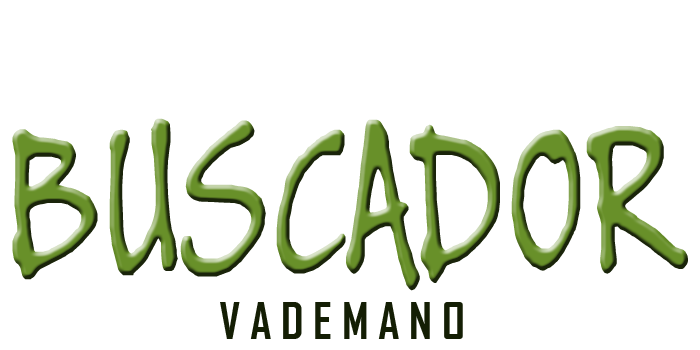
<style>
.page{position:relative;width:700px;height:350px;background:#ffffff}
.page>*{position:absolute;margin:0}
.t1{font:235.2px "BuxtonSketch";scale:0.68 1}
.t2{font:48px "AgencyFB-Bold";letter-spacing:0.2em;color:#141e04}
</style>
<div class="page">
<p class="t1" style="left:12px;top:118px;width:676px;height:173px">BUSCADOR</p>
<p class="t2" style="left:220px;top:302px;width:243px;height:37px">VADEMANO</p>
</div>
